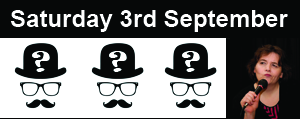
<style>
.page{position:relative;width:300px;height:119px;background:#ffffff}
.page>*{position:absolute;margin:0}
.t1{font:24px "Arial-BoldMT";color:#ffffff}
</style>
<div class="page">
<p class="t1" style="left:10px;top:10px;width:278px;height:22px">Saturday 3rd September</p>
</div>
